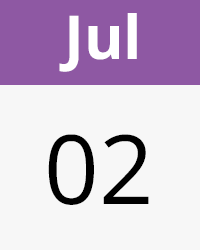
<style>
.page{position:relative;width:200px;height:250px;background:#f7f7f7}
.page>*{position:absolute;margin:0}
.t1{font:60.5px "OpenSans-Bold";color:#ffffff}
.t2{font:96px "OpenSans";color:#000000}
</style>
<div class="page">
<p class="t1" style="left:59px;top:13px;width:78px;height:59px">Jul</p>
<p class="t2" style="left:48px;top:134px;width:101px;height:71px">02</p>
</div>
